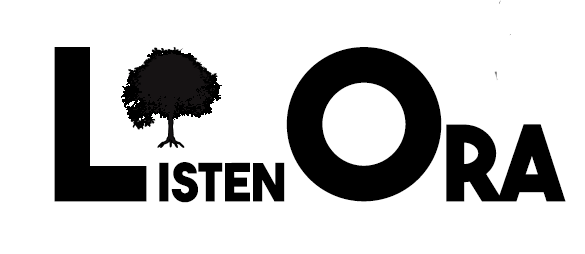
<style>
.page{position:relative;width:585px;height:254px;background:#ffffff}
.page>*{position:absolute;margin:0}
.t1{font:75px "TheBoldFont-Bold";color:#000000;font-variant:small-caps}
.t2{font:300px "TheBoldFont-Bold";color:#000000;font-variant:small-caps}
.t3{font:150px "TheBoldFont-Bold";color:#000000;font-variant:small-caps}
</style>
<div class="page">
<p class="t1" style="left:54px;top:47px;width:512px;height:156px"><span class="t2">l</span>isten<span class="t2">o</span><span class="t3">ra</span></p>
</div>
